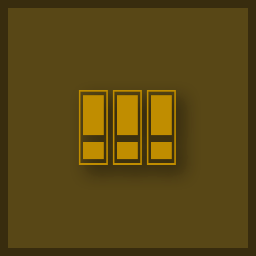
<style>
.page{position:relative;width:256px;height:256px;background:#584716}
.page>*{position:absolute;margin:0}
.t1{font:150px "SpaceRangerAcademy";color:#c08d00}
</style>
<div class="page">
<p class="t1" style="left:78px;top:90px;width:98px;height:75px">!!!</p>
</div>
